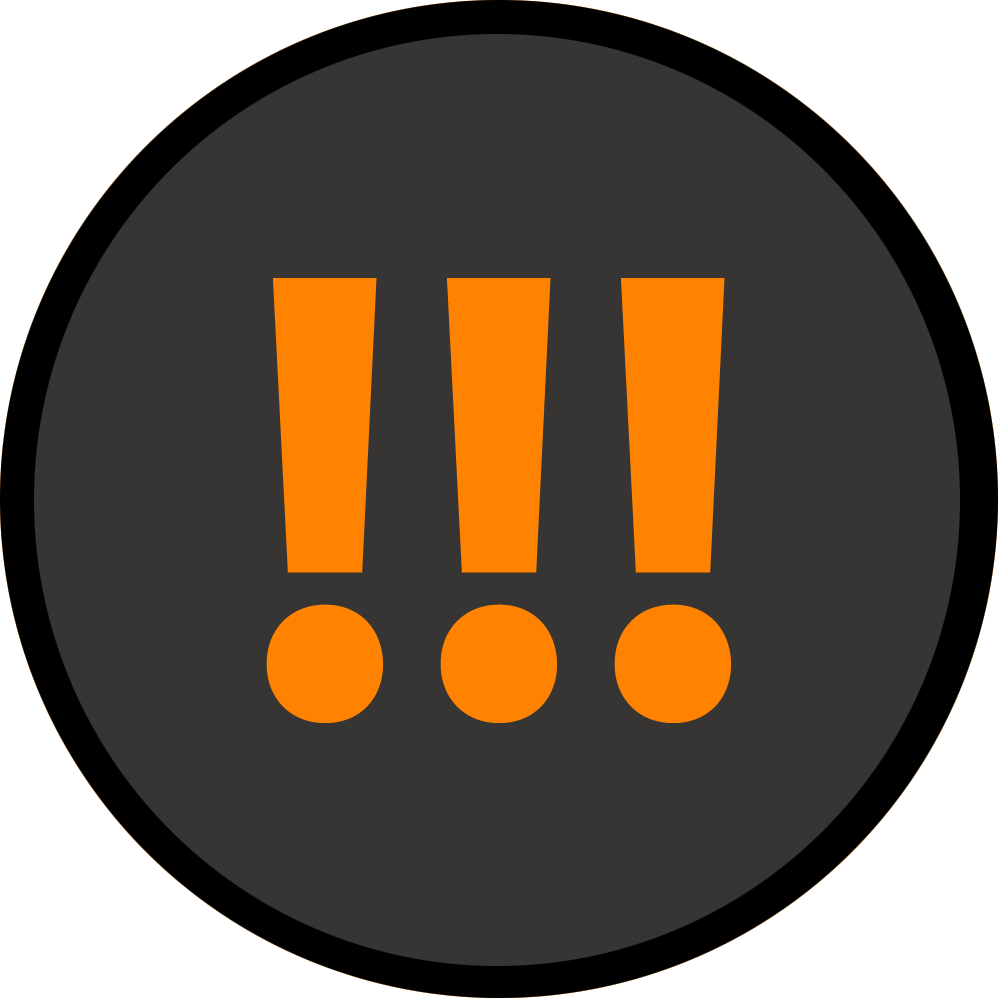
<style>
.page{position:relative;width:1000px;height:1000px;background:#363534}
.page>*{position:absolute;margin:0}
.t1{font:650px "MyriadPro-Bold";color:#ff8300}
</style>
<div class="page">
<p class="t1" style="left:266px;top:278px;width:465px;height:445px">!!!</p>
</div>
